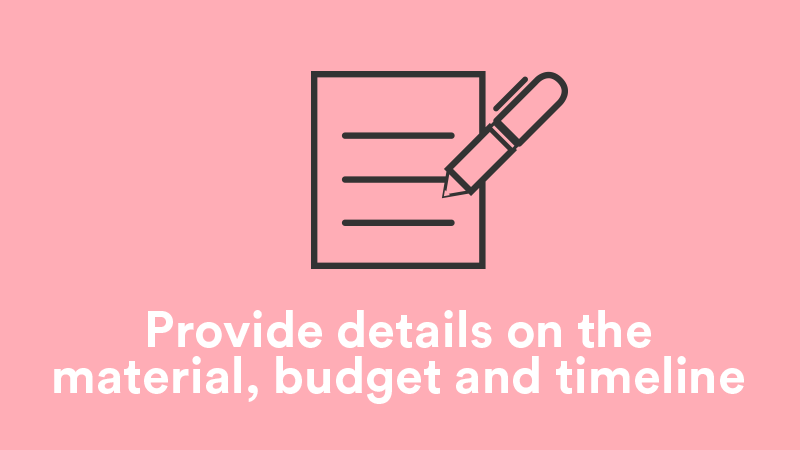
<style>
.page{position:relative;width:800px;height:450px;background:#ffadb6}
.page>*{position:absolute;margin:0}
.t1{font:50.7px/46.7px "CircularStd-Bold";color:#ffffff}
.t2{font:50.7px/46.7px "CircularStd-Bold";color:#ffffff;text-transform:uppercase}
</style>
<div class="page">
<p class="t1" style="left:54px;top:310px;width:690px;height:94px;text-align:center"><span class="t2">p</span>rovide details on the<br>material, budget and timeline</p>
</div>
